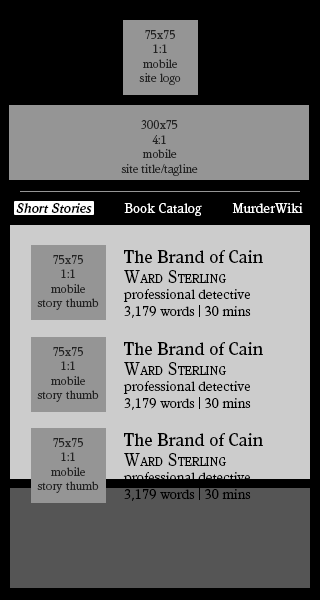
<style>
.page{position:relative;width:320px;height:600px;background:#000000}
.page>*{position:absolute;margin:0}
.t1{font:12px "Kandal-Book";color:#222222}
.t2{font:14px "Kandal-Book";color:#ffffff}
.t3{font:14px "Kandal-MediumItalic";color:#000000}
.t4{font:18px "Kandal-Medium";color:#000000}
.t5{font:18px "Kandal-Book";color:#000000;font-variant:small-caps}
.t6{font:14px "Kandal-Book";color:#000000}
</style>
<div class="page">
<p class="t1" style="left:139px;top:30px;width:42px;height:55px;text-align:center">75x75<br>1:1<br>mobile<br>site logo</p>
<p class="t1" style="left:121px;top:120px;width:77px;height:56px;text-align:center">300x75<br>4:1<br>mobile<br>site title/tagline</p>
<p class="t2" style="left:16px;top:203px;width:287px;height:13px"><span class="t3">Short Stories</span> Book Catalog MurderWiki</p>
<p class="t1" style="left:37px;top:255px;width:62px;height:55px;text-align:center">75x75<br>1:1<br>mobile<br>story thumb</p>
<p class="t4" style="left:124px;top:250px;width:139px;height:13px">The Brand of Cain</p>
<p class="t5" style="left:124px;top:270px;width:103px;height:13px">Ward Sterling</p>
<p class="t6" style="left:123px;top:289px;width:128px;height:29px">professional detective<br>3,179 words | 30 mins</p>
<p class="t4" style="left:124px;top:342px;width:139px;height:13px">The Brand of Cain</p>
<p class="t1" style="left:37px;top:347px;width:62px;height:55px;text-align:center">75x75<br>1:1<br>mobile<br>story thumb</p>
<p class="t5" style="left:124px;top:362px;width:103px;height:13px">Ward Sterling</p>
<p class="t6" style="left:123px;top:381px;width:128px;height:29px">professional detective<br>3,179 words | 30 mins</p>
<p class="t1" style="left:37px;top:438px;width:62px;height:55px;text-align:center">75x75<br>1:1<br>mobile<br>story thumb</p>
<p class="t4" style="left:124px;top:433px;width:139px;height:13px">The Brand of Cain</p>
<p class="t5" style="left:124px;top:453px;width:103px;height:13px">Ward Sterling</p>
</div>
